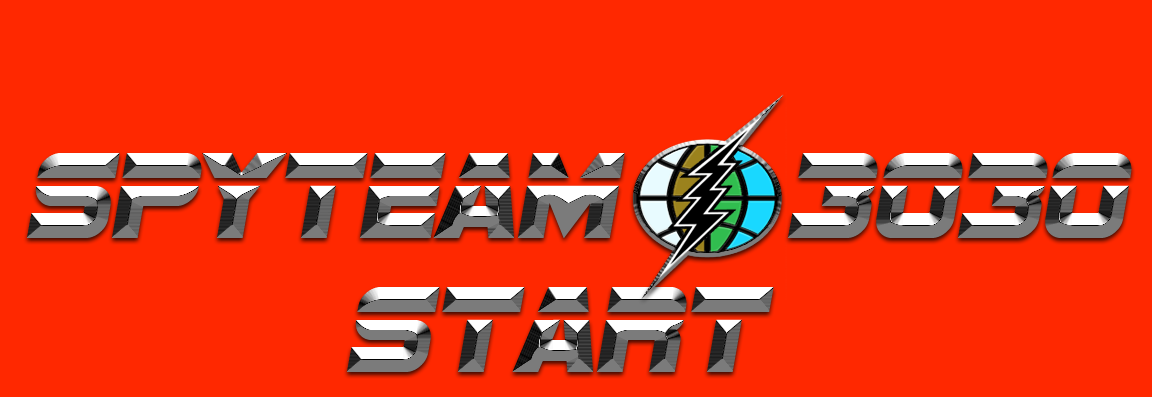
<style>
.page{position:relative;width:1152px;height:397px;background:#ff2800}
.page>*{position:absolute;margin:0}
.t1{font:126.9px "SFSportsNight"}
.t2{font:126.9px "SFSportsNight";letter-spacing:-0.045em}
</style>
<div class="page">
<p class="t1" style="left:27px;top:153px;width:1105px;height:85px">S<span class="t2">p</span>yTeam 3030</p>
<p class="t1" style="left:347px;top:287px;width:427px;height:85px">Start</p>
</div>
